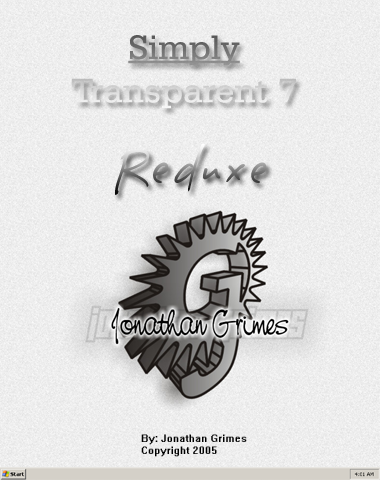
<style>
.page{position:relative;width:380px;height:480px}
.page>*{position:absolute;margin:0}
.t1{font:36px "SerifaBT-Roman"}
.t2{font:36px "SerifaBT-Roman";text-decoration:underline}
.t3{font:48px "DesertDogHmk"}
.t4{font:10px "System";color:#000000}
</style>
<div class="page">
<p class="t1" style="left:71px;top:35px;width:225px;height:74px;text-align:center"><span class="t2">Simply<br></span>Transparent 7</p>
<p class="t3" style="left:115px;top:143px;width:152px;height:52px">Reduxe</p>
<p class="t4" style="left:141px;top:434px;width:106px;height:23px">By: Jonathan Grimes<br>Copyright 2005</p>
</div>
